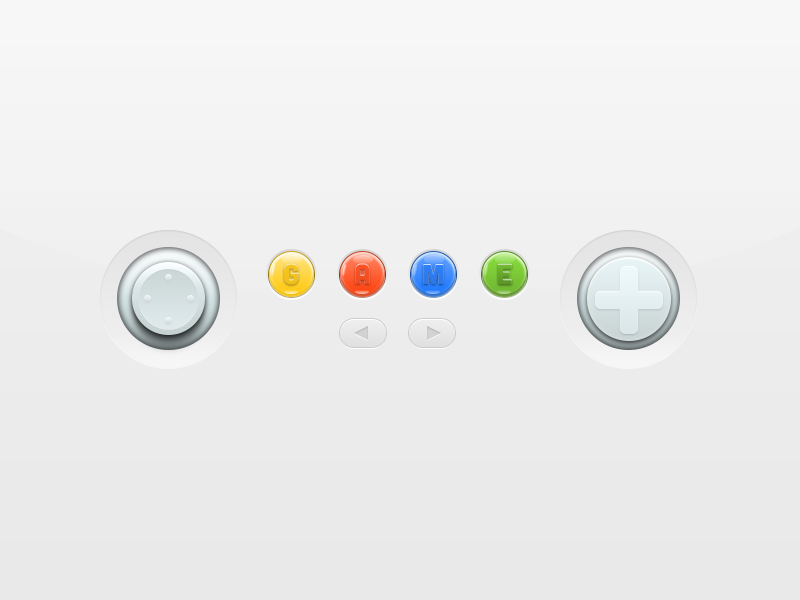
<style>
.page{position:relative;width:800px;height:600px}
.page>*{position:absolute;margin:0}
.t1{font:28.6px "Cubano-Regular";color:#f2c31d}
.t2{font:28.6px "Cubano-Regular";color:#f85023}
.t3{font:28.6px "Cubano-Regular";color:#2d7df2}
</style>
<div class="page">
<p class="t1" style="left:284px;top:263px;width:15px;height:22px">G</p>
<p class="t2" style="left:355px;top:263px;width:15px;height:21px">A</p>
<p class="t3" style="left:423px;top:264px;width:21px;height:20px">M</p>
</div>
